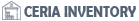
<style>
.page{position:relative;width:139px;height:21px;background:#ffffff}
.page>*{position:absolute;margin:0}
.t1{font:16.2px "BerlinSansFBDemi-Bold";color:#566374;scale:0.8 1}
</style>
<div class="page">
<p class="t1" style="left:24px;top:6px;width:112px;height:11px">CERIA INVENTORY</p>
</div>
